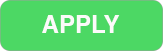
<style>
.page{position:relative;width:163px;height:51px;background:#4cd864}
.page>*{position:absolute;margin:0}
.t1{font:24px "Helvetica-Bold";color:#fcfafa}
</style>
<div class="page">
<p class="t1" style="left:42px;top:15px;width:78px;height:18px">APPLY</p>
</div>
